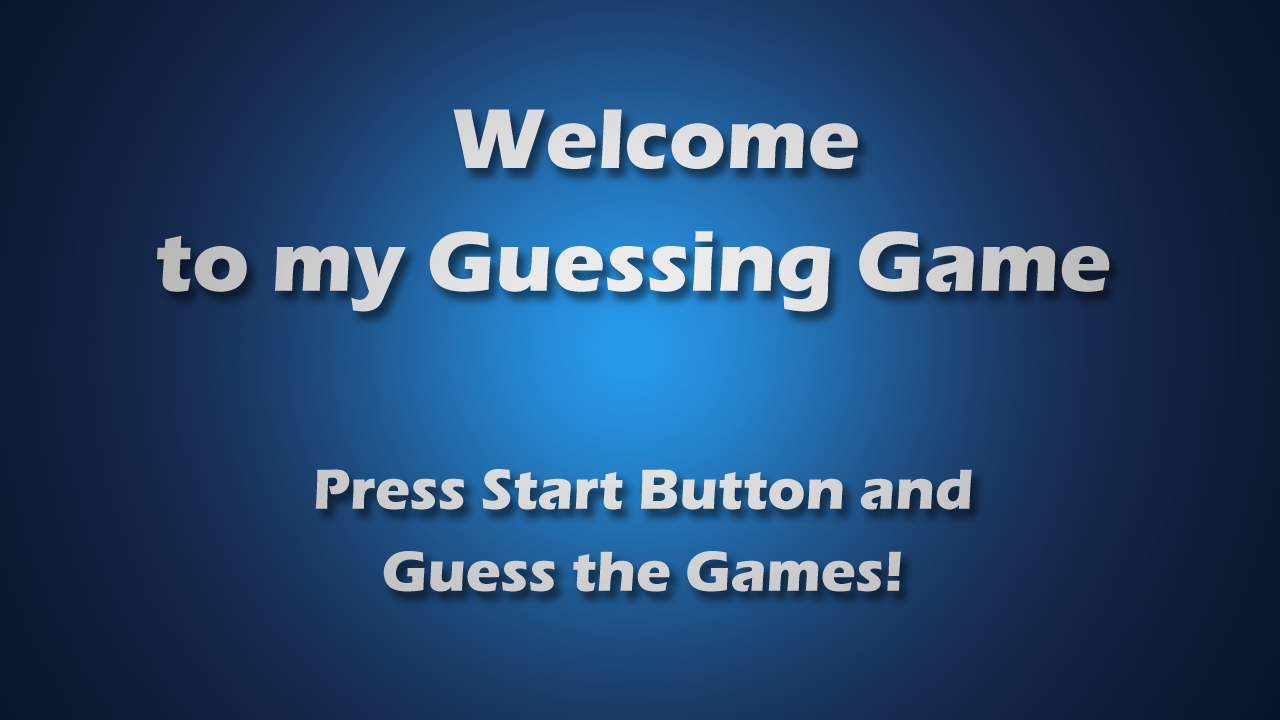
<style>
.page{position:relative;width:1280px;height:720px}
.page>*{position:absolute;margin:0}
.t1{font:87.7px/122.8px "ErasITC-Bold";color:#dcdcdc}
.t2{font:58.4px/81.8px "ErasITC-Bold";color:#cfcfcf}
</style>
<div class="page">
<p class="t1" style="left:157px;top:109px;width:953px;height:203px;text-align:center">Welcome <br> to my Guessing Game</p>
<p class="t2" style="left:315px;top:469px;width:657px;height:123px;text-align:center">Press Start Button and<br>!Guess the Games</p>
</div>
